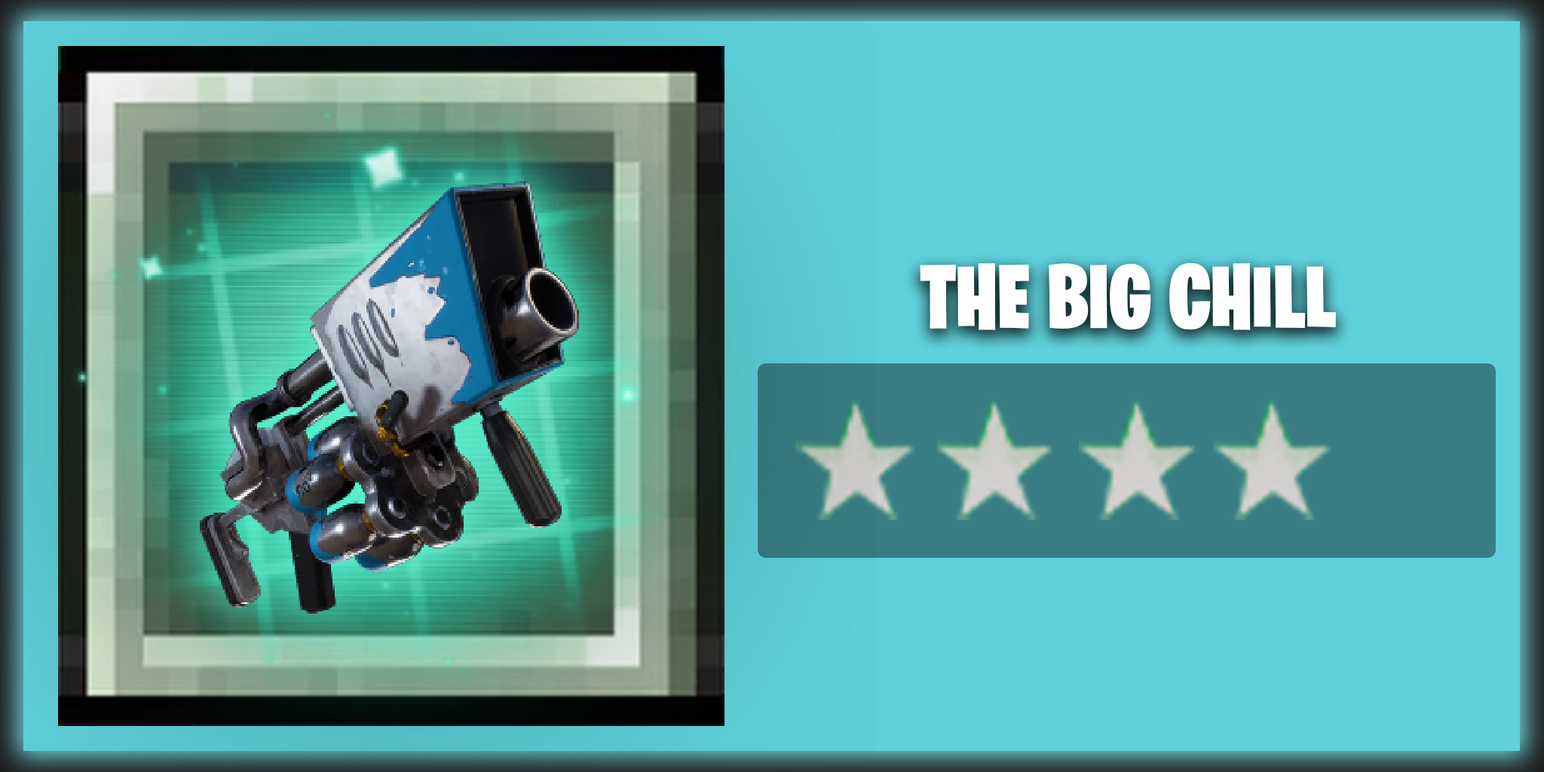
<style>
.page{position:relative;width:1544px;height:772px;background:#5ed1db}
.page>*{position:absolute;margin:0}
.t1{font:90.5px "BurbankBigCondensed-Black";color:#ffffff}
</style>
<div class="page">
<p class="t1" style="left:920px;top:262px;width:416px;height:68px">THE BIG CHILL</p>
</div>
